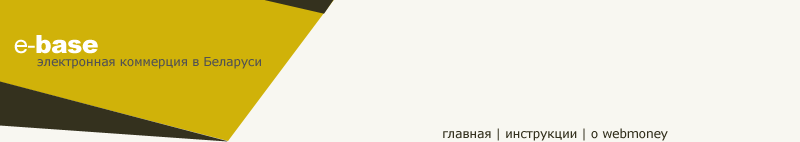
<style>
.page{position:relative;width:800px;height:142px;background:#f8f7f1}
.page>*{position:absolute;margin:0}
.t1{font:25px "Arial-Black";letter-spacing:-0.025em;color:#ffffff}
.t2{font:25px "ArialMT";letter-spacing:-0.025em;color:#ffffff}
.t3{font:12.5px "Verdana";letter-spacing:-0.025em;color:#525252}
.t4{font:12.5px "Verdana";letter-spacing:-0.025em;color:#34311e}
</style>
<div class="page">
<p class="t1" style="left:14px;top:35px;width:84px;height:19px"><span class="t2">e-</span>base</p>
<p class="t3" style="left:37px;top:57px;width:224px;height:12px">электронная коммерция в Беларуси</p>
<p class="t4" style="left:443px;top:128px;width:225px;height:13px">главная | инструкции | о webmoney</p>
</div>
